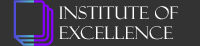
<style>
.page{position:relative;width:200px;height:46px;background:#333333}
.page>*{position:absolute;margin:0}
.t1{font:17.3px "FelixTitlingMT";letter-spacing:0.01em;color:#fefefe;text-transform:uppercase;scale:1.04 1}
</style>
<div class="page">
<p class="t1" style="left:59px;top:6px;width:119px;height:34px">INSTITUTE OF<br>EXCELLENCE</p>
</div>
